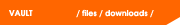
<style>
.page{position:relative;width:180px;height:25px;background:#ff6600}
.page>*{position:absolute;margin:0}
.t1{font:8px "Atlanta-Demi";color:#ffffff}
</style>
<div class="page">
<p class="t1" style="left:9px;top:10px;width:24px;height:7px">VAULT</p>
<p class="t1" style="left:76px;top:9px;width:78px;height:9px">/ files / downloads /</p>
</div>
